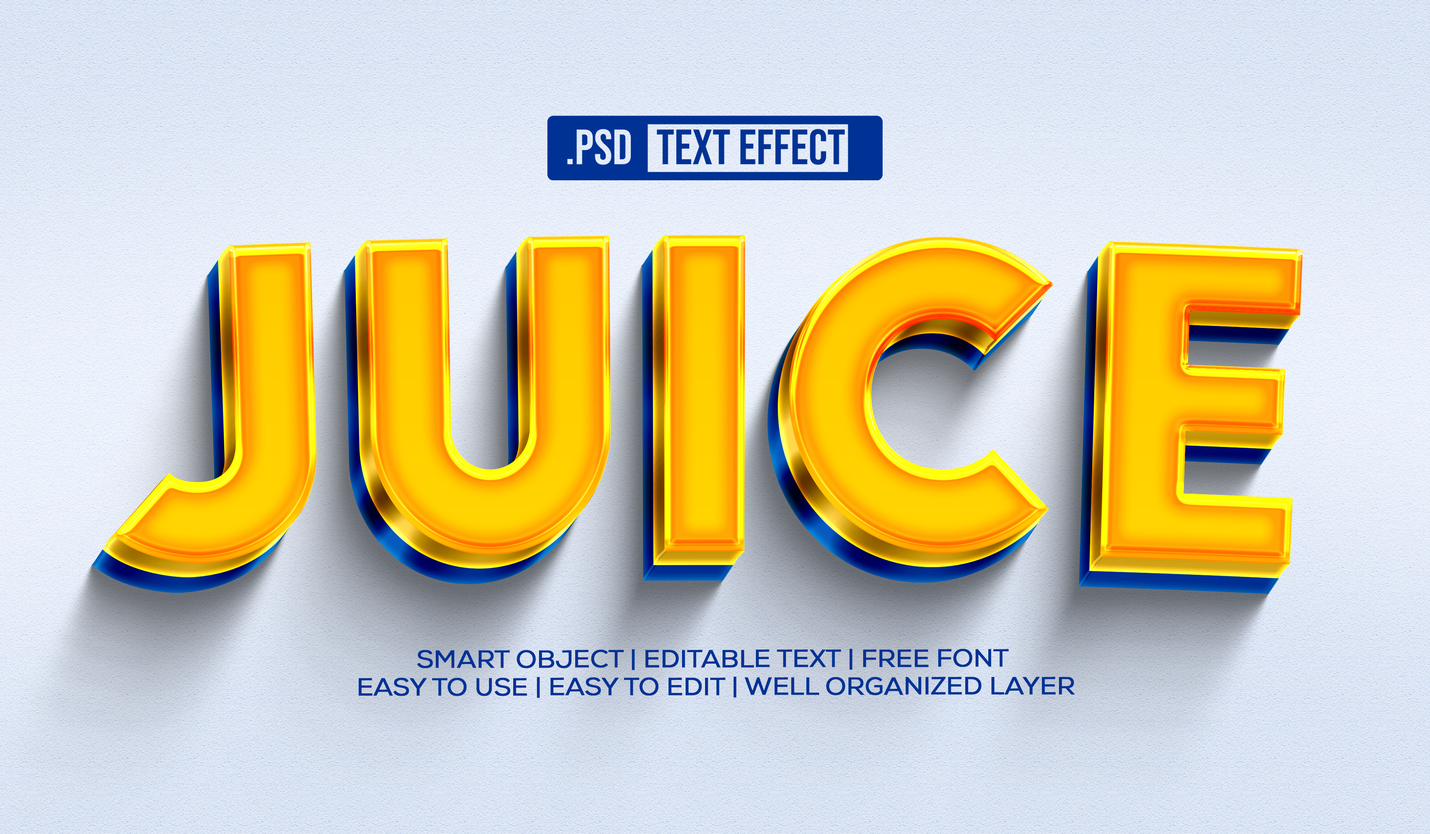
<style>
.page{position:relative;width:1430px;height:834px}
.page>*{position:absolute;margin:0}
.t1{font:24.7px/27.7px "Nexa-Regular";letter-spacing:-0.02em;color:#003295;font-weight:bold;scale:1.04 1}
</style>
<div class="page">
<p class="t1" style="left:359px;top:649px;width:716px;height:49px;text-align:center">SMART OBJECT | EDITABLE TEXT | FREE FONT <br>EASY TO USE | EASY TO EDIT | WELL ORGANIZED LAYER</p>
</div>
